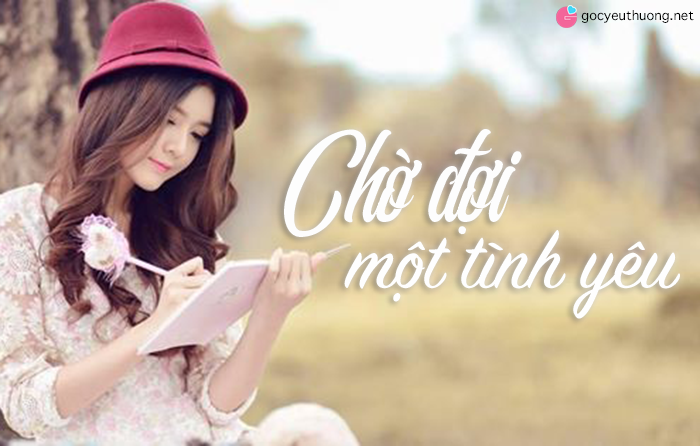
<style>
.page{position:relative;width:700px;height:446px}
.page>*{position:absolute;margin:0}
.t1{font:18px "AppleSymbols";color:#000000}
.t2{font:79.7px "FS-Southamton";color:#fdfdfd}
.t3{font:86.3px "SignPainter-HouseScript";color:#fefefe}
</style>
<div class="page">
<p class="t1" style="left:581px;top:10px;width:113px;height:13px">gocyeuthuong.net</p>
<p class="t2" style="left:284px;top:129px;width:238px;height:108px">Chờ đợi</p>
<p class="t3" style="left:344px;top:230px;width:336px;height:89px">một tình yêu</p>
</div>
